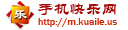
<style>
.page{position:relative;width:128px;height:30px;background:#ffffff}
.page>*{position:absolute;margin:0}
.t1{font:16px "STLiti";color:#a60808}
.t2{font:10px "FranklinGothic-Medium";color:#d32805}
</style>
<div class="page">
<p class="t1" style="left:38px;top:3px;width:78px;height:12px">手机快乐网</p>
<p class="t2" style="left:38px;top:18px;width:79px;height:9px">http://m.kuaile.us</p>
</div>
